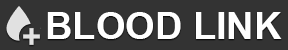
<style>
.page{position:relative;width:288px;height:50px;background:#333333}
.page>*{position:absolute;margin:0}
.t1{font:37.9px "Arial-BoldMT";color:#ffffff}
</style>
<div class="page">
<p class="t1" style="left:47px;top:12px;width:235px;height:27px">BLOOD LINK</p>
</div>
